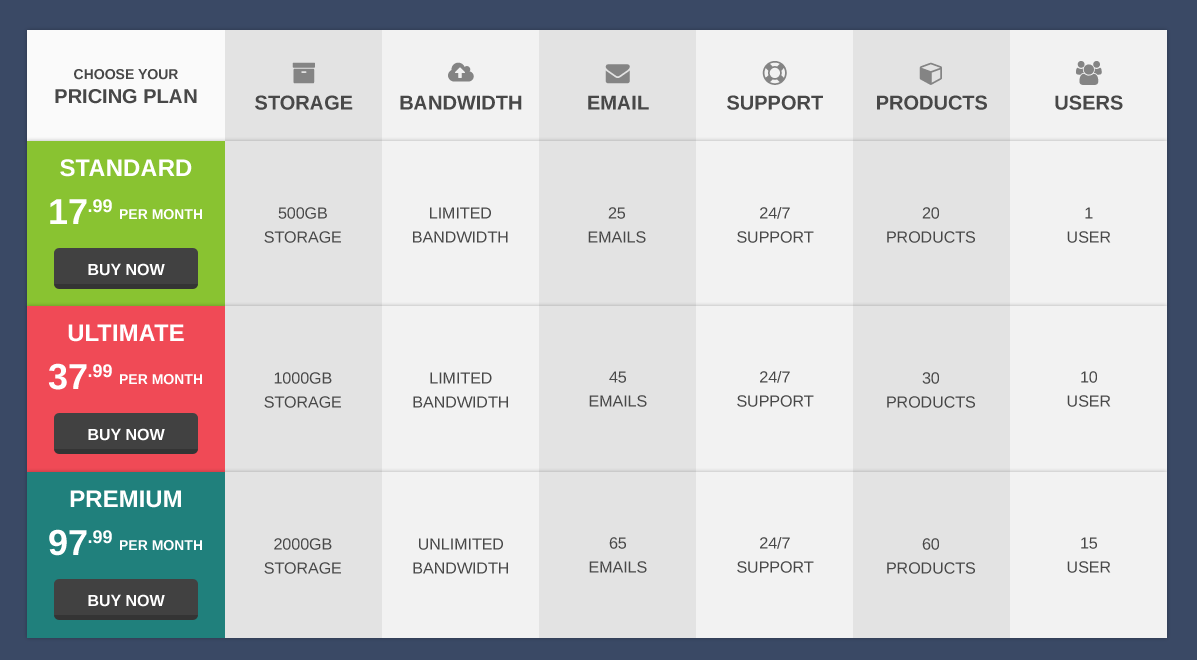
<style>
.page{position:relative;width:1197px;height:660px;background:#f2f2f2}
.page>*{position:absolute;margin:0}
.t1{font:14px "Arimo-Bold";color:#484848;text-transform:uppercase}
.t2{font:20px "Arimo-Bold";color:#484848;text-transform:uppercase}
.t3{font:24px "Arimo-Bold";color:#ffffff;text-transform:uppercase}
.t4{font:36px "Arimo-Bold";color:#ffffff;text-transform:uppercase}
.t5{font:18px "Arimo-Bold";color:#ffffff;text-transform:uppercase}
.t6{font:14px "Arimo-Bold";color:#ffffff;text-transform:uppercase}
.t7{font:16px/24px "Arimo";color:#484848;text-transform:uppercase}
.t8{font:16px "Arimo-Bold";color:#ffffff;text-transform:uppercase}
</style>
<div class="page">
<p class="t1" style="left:74px;top:69px;width:104px;height:11px">Choose your</p>
<p class="t2" style="left:55px;top:89px;width:142px;height:15px">pricing plan</p>
<p class="t3" style="left:60px;top:159px;width:132px;height:18px">standard</p>
<p class="t4" style="left:50px;top:199px;width:37px;height:25px">17</p>
<p class="t5" style="left:88px;top:199px;width:24px;height:14px">.99</p>
<p class="t6" style="left:120px;top:209px;width:82px;height:11px">per Month</p>
<p class="t7" style="left:264px;top:207px;width:77px;height:36px;text-align:center">500GB<br>storage</p>
<p class="t7" style="left:413px;top:207px;width:95px;height:36px;text-align:center">limited<br>bandwidth</p>
<p class="t7" style="left:588px;top:207px;width:58px;height:36px;text-align:center">25<br>emails</p>
<p class="t7" style="left:737px;top:207px;width:77px;height:36px;text-align:center">24/7<br>support</p>
<p class="t7" style="left:887px;top:207px;width:88px;height:36px;text-align:center">20<br>products</p>
<p class="t7" style="left:1067px;top:207px;width:44px;height:36px;text-align:center">1<br>user</p>
<p class="t8" style="left:88px;top:263px;width:77px;height:13px">buy now</p>
<p class="t3" style="left:68px;top:324px;width:116px;height:18px">ultimate</p>
<p class="t4" style="left:48px;top:363px;width:39px;height:27px">37</p>
<p class="t5" style="left:88px;top:364px;width:24px;height:14px">.99</p>
<p class="t6" style="left:120px;top:374px;width:82px;height:11px">per Month</p>
<p class="t7" style="left:264px;top:372px;width:77px;height:36px;text-align:center">1000gb<br>storage</p>
<p class="t7" style="left:413px;top:372px;width:95px;height:36px;text-align:center">limited<br>bandwidth</p>
<p class="t7" style="left:589px;top:371px;width:58px;height:36px;text-align:center">45<br>emails</p>
<p class="t7" style="left:737px;top:371px;width:77px;height:36px;text-align:center">24/7<br>support</p>
<p class="t7" style="left:887px;top:372px;width:88px;height:36px;text-align:center">30<br>products</p>
<p class="t7" style="left:1067px;top:371px;width:44px;height:36px;text-align:center">10<br>user</p>
<p class="t8" style="left:88px;top:428px;width:77px;height:13px">buy now</p>
<p class="t3" style="left:70px;top:490px;width:111px;height:18px">premium</p>
<p class="t4" style="left:49px;top:529px;width:38px;height:27px">97</p>
<p class="t5" style="left:88px;top:530px;width:24px;height:14px">.99</p>
<p class="t6" style="left:120px;top:540px;width:82px;height:11px">per Month</p>
<p class="t7" style="left:264px;top:538px;width:77px;height:36px;text-align:center">2000GB<br>storage</p>
<p class="t7" style="left:413px;top:538px;width:95px;height:36px;text-align:center">unlimited<br>bandwidth</p>
<p class="t7" style="left:589px;top:537px;width:58px;height:36px;text-align:center">65<br>emails</p>
<p class="t7" style="left:737px;top:537px;width:77px;height:36px;text-align:center">24/7<br>support</p>
<p class="t7" style="left:887px;top:538px;width:88px;height:36px;text-align:center">60<br>products</p>
<p class="t7" style="left:1067px;top:537px;width:44px;height:36px;text-align:center">15<br>user</p>
<p class="t8" style="left:88px;top:594px;width:77px;height:13px">buy now</p>
</div>
